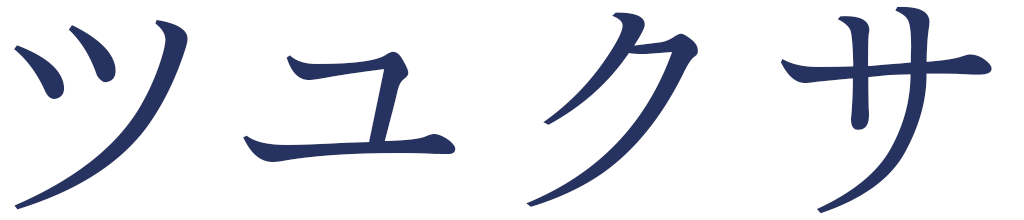
<style>
.page{position:relative;width:1024px;height:220px;background:#ffffff}
.page>*{position:absolute;margin:0}
.t1{font:328.2px "Honoka-Mincho";letter-spacing:-0.04em;color:#263260}
</style>
<div class="page">
<p class="t1" style="left:14px;top:6px;width:978px;height:208px">ツユクサ</p>
</div>
